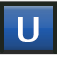
<style>
.page{position:relative;width:57px;height:57px}
.page>*{position:absolute;margin:0}
.t1{font:47.8px "SakkalMajalla";letter-spacing:-0.025em;color:#ffffff;font-variant:small-caps;font-weight:bold}
</style>
<div class="page">
<p class="t1" style="left:18px;top:17px;width:21px;height:25px">U</p>
</div>
